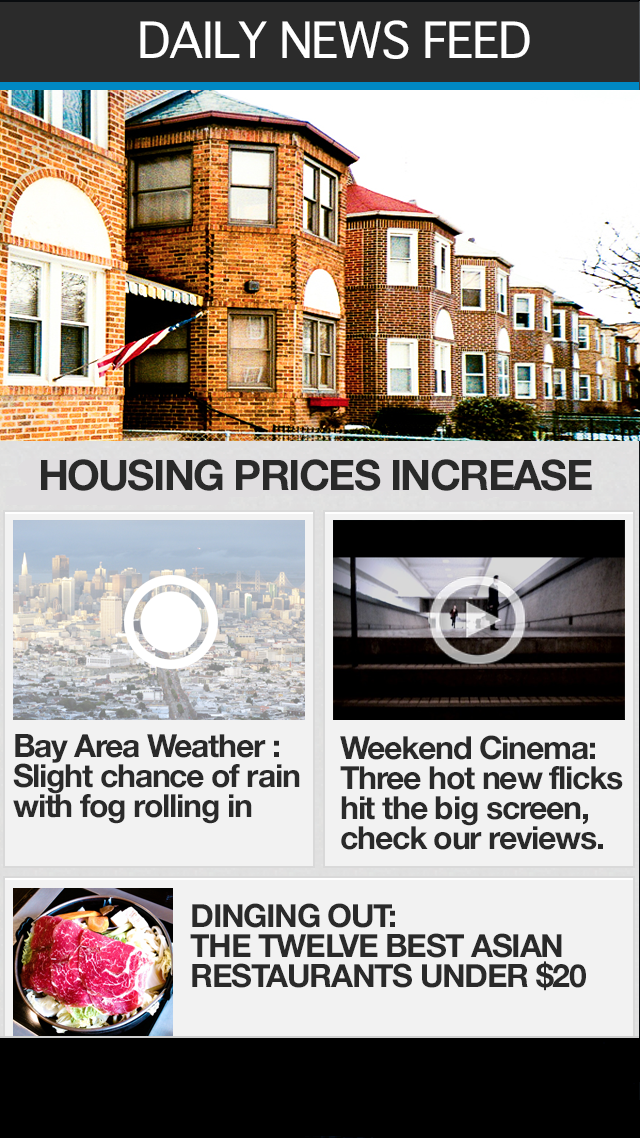
<style>
.page{position:relative;width:640px;height:1138px}
.page>*{position:absolute;margin:0}
.t1{font:48px "Geneva";letter-spacing:-0.04em;color:#ffffff}
.t2{font:42px "HelveticaNeue-Bold";letter-spacing:-0.04em;color:#2a2a2a}
.t3{font:32px/30px "HelveticaNeue-Bold";letter-spacing:-0.04em;color:#2a2a2a}
</style>
<div class="page">
<p class="t1" style="left:140px;top:20px;width:390px;height:39px">DAILY NEWS FEED</p>
<p class="t2" style="left:41px;top:459px;width:551px;height:32px">HOUSING PRICES INCREASE</p>
<p class="t3" style="left:13px;top:734px;width:287px;height:90px">Bay Area Weather :<br>Slight chance of rain <br>with fog rolling in</p>
<p class="t3" style="left:340px;top:735px;width:283px;height:115px">Weekend Cinema:<br>Three hot new flicks<br>hit the big screen,<br>check our reviews.</p>
<p class="t3" style="left:190px;top:903px;width:396px;height:88px">DINGING OUT:<br>THE TWELVE BEST ASIAN<br>RESTAURANTS UNDER $20</p>
</div>
